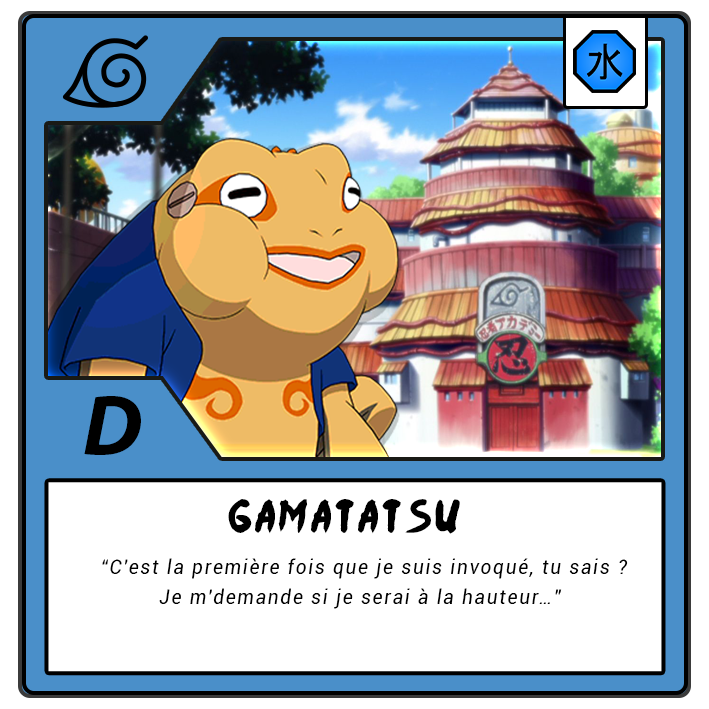
<style>
.page{position:relative;width:709px;height:709px;background:#ffffff}
.page>*{position:absolute;margin:0}
.t1{font:87.5px "MyriadPro-BoldIt";letter-spacing:-0.12em;color:#000000}
.t2{font:37.5px "Ninja-Naruto";letter-spacing:0.1em;color:#000000}
.t3{font:20.8px/29.2px "Roboto-Italic";letter-spacing:0.1em;color:#000000;scale:0.9 1}
</style>
<div class="page">
<p class="t1" style="left:84px;top:396px;width:57px;height:59px">D</p>
<p class="t2" style="left:228px;top:499px;width:232px;height:35px">Gamatatsu</p>
<p class="t3" style="left:102px;top:558px;width:526px;height:51px">“C'est la première fois que je suis invoqué, tu sais ? <br>         Je m'demande si je serai à la hauteur…”</p>
</div>
